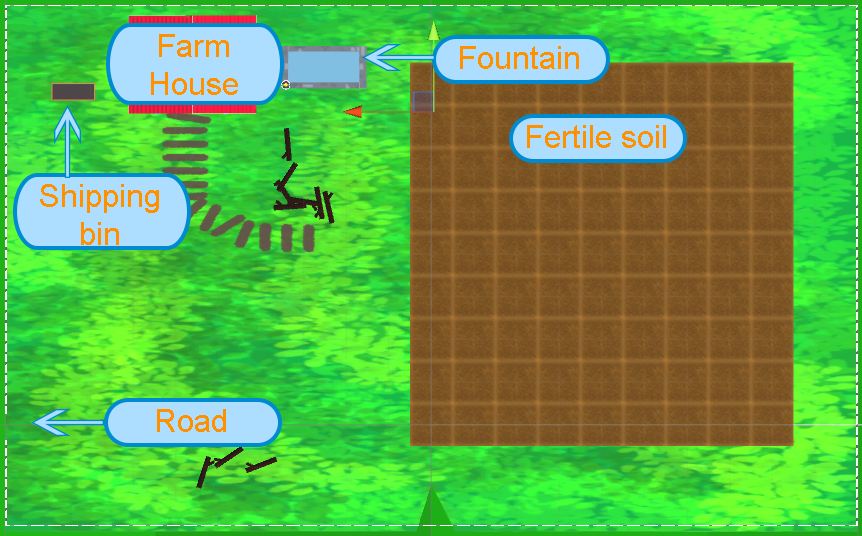
<style>
.page{position:relative;width:862px;height:536px}
.page>*{position:absolute;margin:0}
.t1{font:32px "ArialMT";color:#ff9000}
</style>
<div class="page">
<p class="t1" style="left:151px;top:34px;width:87px;height:61px;text-align:center">Farm House</p>
<p class="t1" style="left:460px;top:46px;width:119px;height:23px">Fountain</p>
<p class="t1" style="left:527px;top:125px;width:139px;height:23px">Fertile soil</p>
<p class="t1" style="left:40px;top:184px;width:119px;height:61px;text-align:center">Shipping bin</p>
<p class="t1" style="left:157px;top:409px;width:69px;height:23px">Road</p>
</div>
